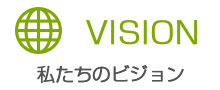
<style>
.page{position:relative;width:220px;height:90px;background:#ffffff}
.page>*{position:absolute;margin:0}
.t1{font:30px "ShinGoPro-Light";color:#80a905;font-weight:bold}
.t2{font:18px "ShinGoPro-Light";color:#545454;font-weight:bold}
</style>
<div class="page">
<p class="t1" style="left:86px;top:20px;width:112px;height:25px">VISION</p>
<p class="t2" style="left:37px;top:65px;width:147px;height:19px">私たちのビジョン</p>
</div>
